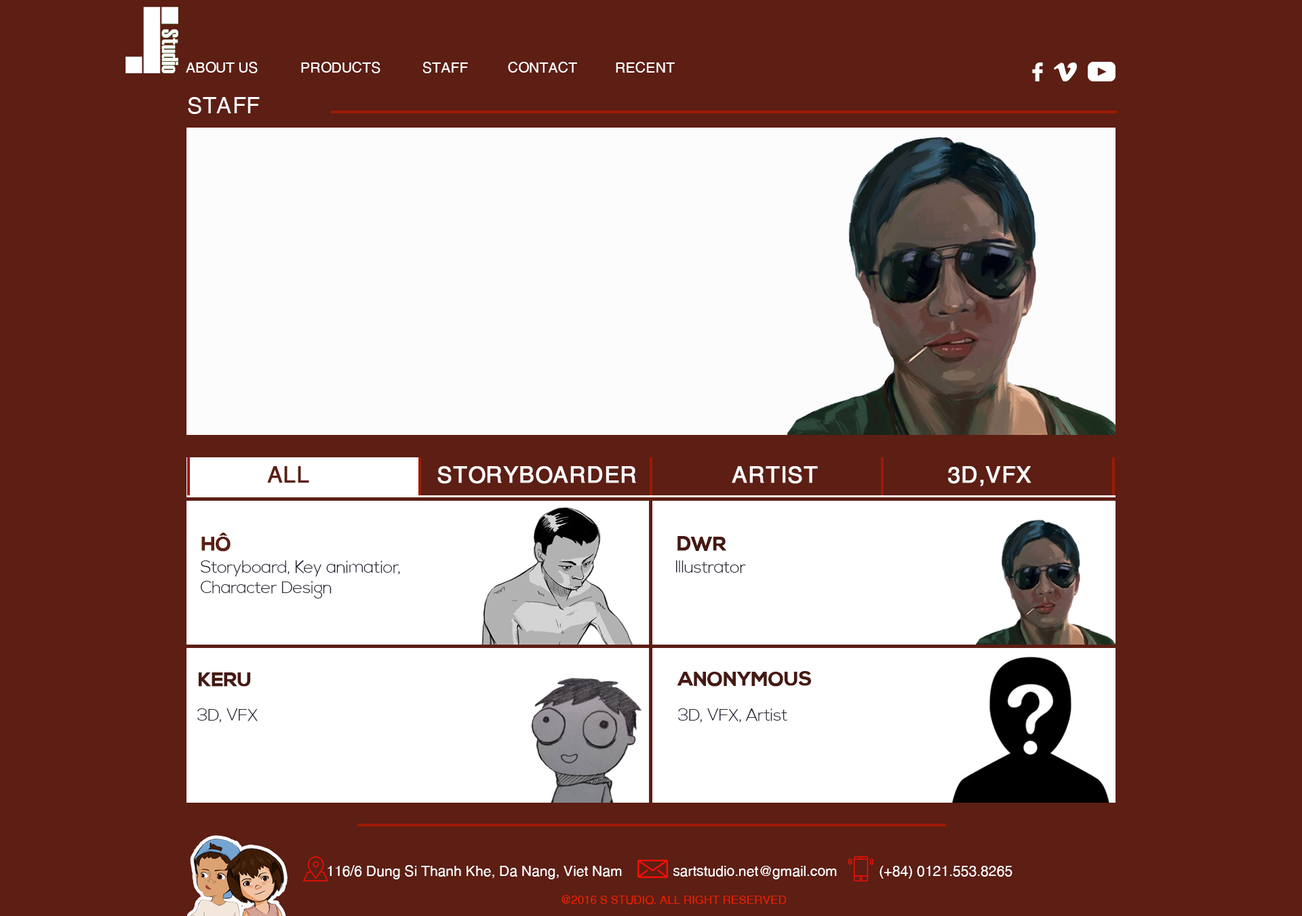
<style>
.page{position:relative;width:1302px;height:916px;background:#5d1e14}
.page>*{position:absolute;margin:0}
.t1{font:14.1px "SVN-Helves";letter-spacing:-0.02em;color:#ffffff;text-transform:uppercase}
.t2{font:22.6px "SVN-Helves";letter-spacing:-0.02em;color:#ffffff;text-transform:uppercase}
.t3{font:22.6px "SVN-Helves";letter-spacing:-0.02em;color:#5d1e14;text-transform:uppercase;font-weight:bold}
.t4{font:22.6px "SVN-Helves";letter-spacing:-0.02em;color:#fdfcfc;text-transform:uppercase;font-weight:bold}
.t5{font:19.8px "SVN-NexaBold";letter-spacing:-0.02em;color:#5d1e14;text-transform:uppercase;font-weight:bold}
.t6{font:19.8px "SVN-NexaBold";letter-spacing:-0.02em;color:#461912;text-transform:uppercase;font-weight:bold}
.t7{font:17px "SVN-NexaLight";letter-spacing:-0.02em;color:#252834}
.t8{font:14.1px "SVN-Helves";letter-spacing:-0.02em;color:#fdfcfc}
.t9{font:11.3px "SVN-Helves";letter-spacing:-0.02em;color:#e62001;text-transform:uppercase}
</style>
<div class="page">
<p class="t1" style="left:186px;top:62px;width:72px;height:11px">about us</p>
<p class="t1" style="left:301px;top:62px;width:80px;height:11px">Products</p>
<p class="t1" style="left:423px;top:62px;width:45px;height:11px">Staff</p>
<p class="t1" style="left:508px;top:62px;width:69px;height:11px">Contact</p>
<p class="t1" style="left:616px;top:62px;width:59px;height:11px">recent</p>
<p class="t2" style="left:188px;top:97px;width:72px;height:17px">staff</p>
<p class="t3" style="left:267px;top:466px;width:42px;height:17px">ALL</p>
<p class="t4" style="left:437px;top:466px;width:199px;height:18px">storyboarder</p>
<p class="t4" style="left:732px;top:466px;width:86px;height:18px">artist</p>
<p class="t4" style="left:948px;top:466px;width:84px;height:20px">3d,vfx</p>
<p class="t5" style="left:201px;top:532px;width:30px;height:19px">HÔ</p>
<p class="t6" style="left:678px;top:536px;width:48px;height:15px">DWR</p>
<p class="t7" style="left:201px;top:560px;width:199px;height:38px">Storyboard, Key animatior,<br>Character Design</p>
<p class="t7" style="left:676px;top:560px;width:70px;height:13px">Illustrator</p>
<p class="t6" style="left:198px;top:672px;width:53px;height:14px">Keru</p>
<p class="t6" style="left:677px;top:671px;width:134px;height:15px">anonymous</p>
<p class="t7" style="left:197px;top:708px;width:61px;height:14px">3D, VFX</p>
<p class="t7" style="left:678px;top:708px;width:109px;height:14px">3D, VFX, Artist</p>
<p class="t8" style="left:328px;top:865px;width:294px;height:14px">116/6 Dung Si Thanh Khe, Da Nang, Viet Nam</p>
<p class="t8" style="left:673px;top:865px;width:164px;height:14px">sartstudio.net@ gmail.com</p>
<p class="t8" style="left:880px;top:865px;width:133px;height:13px">(+84) 0121.553.8265</p>
<p class="t9" style="left:562px;top:895px;width:225px;height:9px">@ 2016 S studio. all right reserved</p>
</div>
